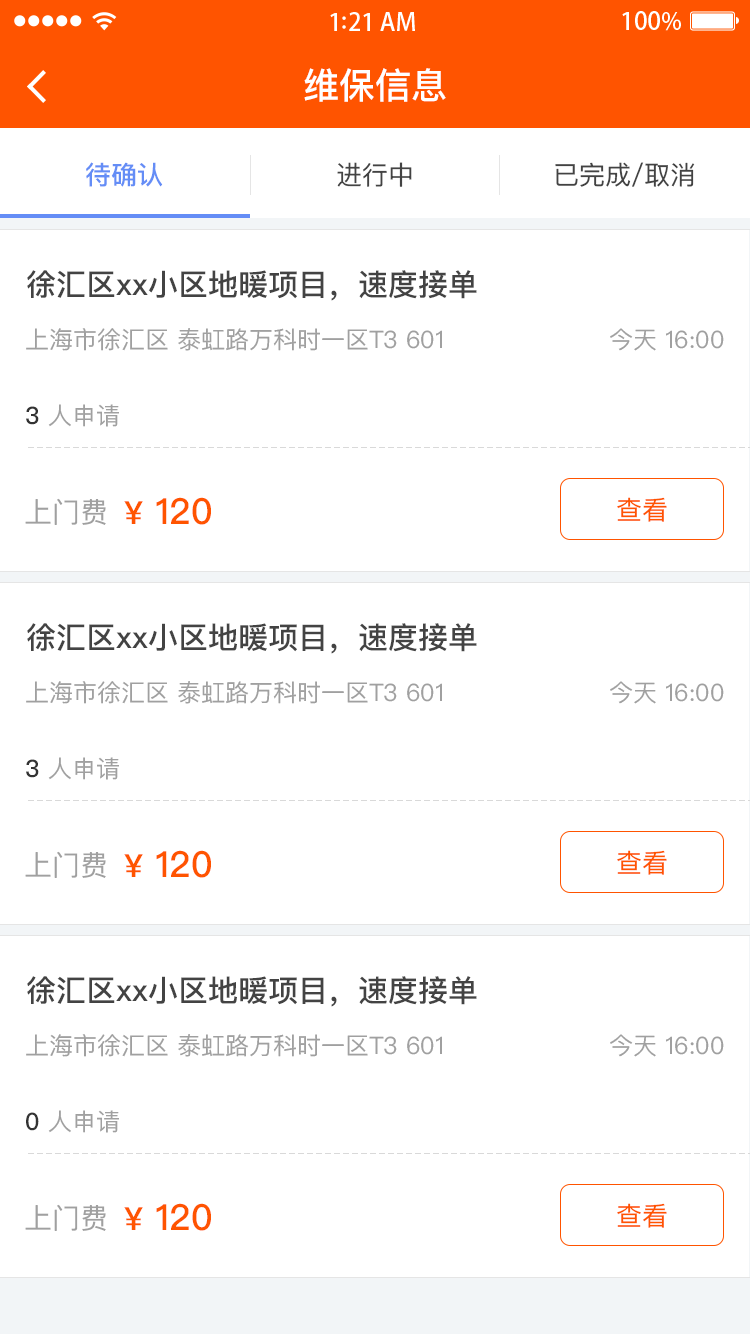
<style>
.page{position:relative;width:750px;height:1334px;background:#ffffff}
.page>*{position:absolute;margin:0}
.t1{font:36px "PingFangSC-Medium";color:#ffffff}
.t2{font:26px "PingFangSC-Medium";color:#648df6}
.t3{font:26px "PingFangSC-Regular";color:#434343}
.t4{font:30px "PingFangSC-Medium";color:#434343}
.t5{font:24px "PingFangSC-Regular";color:#a0a0a0}
.t6{font:24px "PingFangSC-Medium";color:#333333}
.t7{font:36px "PingFangSC-Medium";color:#ff5400}
.t8{font:32px "PingFangSC-Medium";color:#ff5400}
.t9{font:26px "PingFangSC-Regular";color:#ff5400}
.t10{font:28px "PingFangSC-Regular";color:#a0a0a0}
</style>
<div class="page">
<p class="t1" style="left:304px;top:68px;width:142px;height:34px">维保信息</p>
<p class="t2" style="left:86px;top:162px;width:77px;height:25px">待确认</p>
<p class="t3" style="left:337px;top:162px;width:75px;height:25px">进行中</p>
<p class="t3" style="left:555px;top:162px;width:140px;height:25px">已完成/取消</p>
<p class="t4" style="left:27px;top:270px;width:450px;height:31px">徐汇区xx小区地暖项目，速度接单</p>
<p class="t5" style="left:26px;top:328px;width:416px;height:23px">上海市徐汇区 泰虹路万科时一区T3 601</p>
<p class="t5" style="left:610px;top:328px;width:114px;height:23px">今天 16:00</p>
<p class="t5" style="left:26px;top:404px;width:93px;height:23px"><span class="t6">3</span> 人申请</p>
<p class="t7" style="left:124px;top:497px;width:87px;height:28px"><span class="t8">¥</span> 120</p>
<p class="t9" style="left:617px;top:497px;width:50px;height:25px">查看</p>
<p class="t10" style="left:25px;top:498px;width:81px;height:27px">上门费</p>
<p class="t4" style="left:27px;top:623px;width:450px;height:31px">徐汇区xx小区地暖项目，速度接单</p>
<p class="t5" style="left:26px;top:681px;width:416px;height:23px">上海市徐汇区 泰虹路万科时一区T3 601</p>
<p class="t5" style="left:610px;top:681px;width:114px;height:23px">今天 16:00</p>
<p class="t5" style="left:26px;top:757px;width:93px;height:23px"><span class="t6">3</span> 人申请</p>
<p class="t10" style="left:25px;top:851px;width:81px;height:27px">上门费</p>
<p class="t7" style="left:124px;top:850px;width:87px;height:28px"><span class="t8">¥</span> 120</p>
<p class="t9" style="left:617px;top:850px;width:50px;height:25px">查看</p>
<p class="t4" style="left:27px;top:976px;width:450px;height:31px">徐汇区xx小区地暖项目，速度接单</p>
<p class="t5" style="left:26px;top:1034px;width:416px;height:23px">上海市徐汇区 泰虹路万科时一区T3 601</p>
<p class="t5" style="left:610px;top:1034px;width:114px;height:23px">今天 16:00</p>
<p class="t5" style="left:26px;top:1110px;width:93px;height:23px"><span class="t6">0</span> 人申请</p>
<p class="t10" style="left:25px;top:1204px;width:81px;height:27px">上门费</p>
<p class="t7" style="left:124px;top:1203px;width:87px;height:28px"><span class="t8">¥</span> 120</p>
<p class="t9" style="left:617px;top:1203px;width:50px;height:25px">查看</p>
</div>
